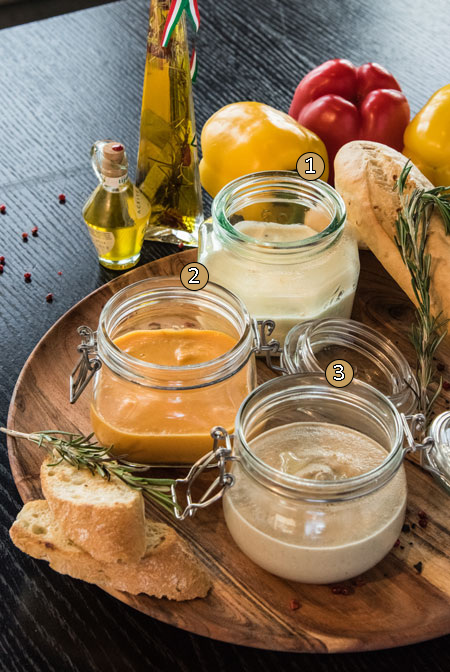
<style>
.page{position:relative;width:450px;height:672px}
.page>*{position:absolute;margin:0}
.t1{font:24px "Calibri";color:#ffffff}
</style>
<div class="page">
<p class="t1" style="left:306px;top:158px;width:9px;height:15px">1</p>
<p class="t1" style="left:189px;top:268px;width:10px;height:15px">2</p>
<p class="t1" style="left:334px;top:365px;width:10px;height:15px">3</p>
</div>
